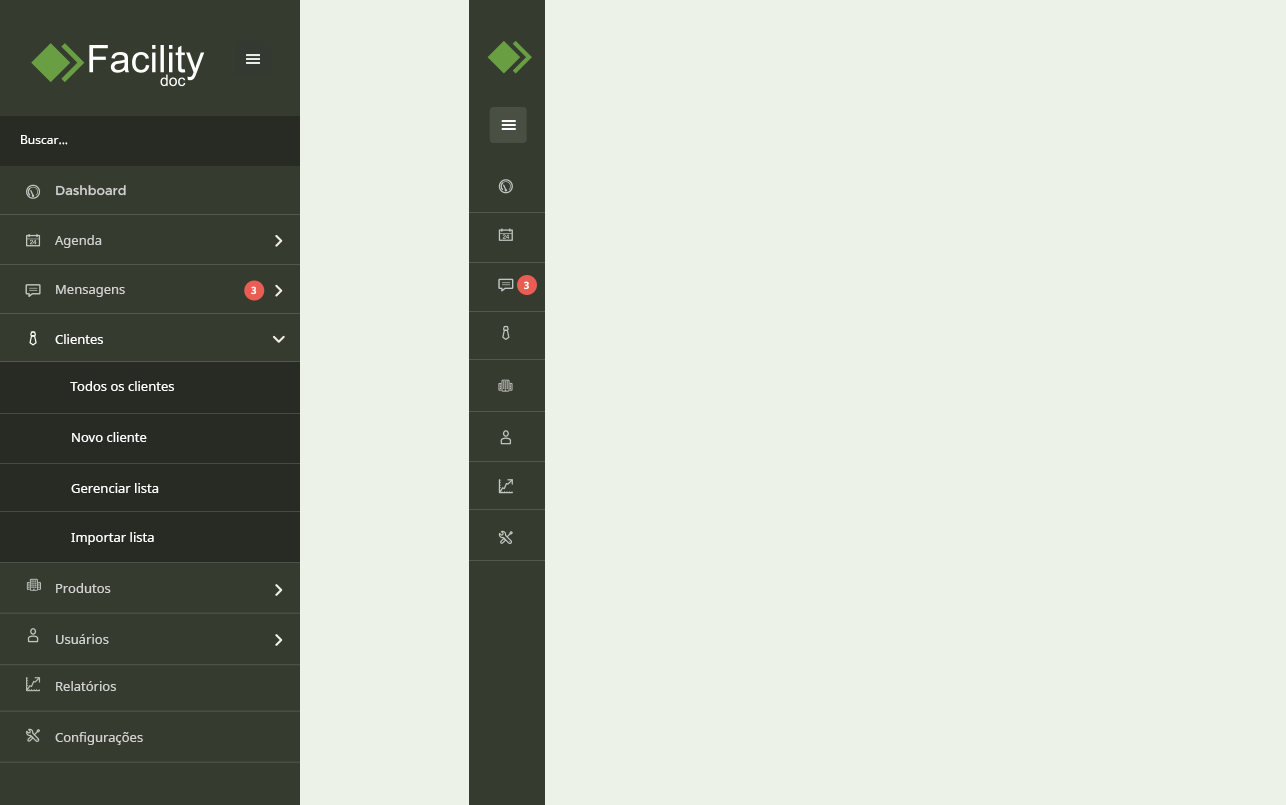
<style>
.page{position:relative;width:1286px;height:805px;background:#edf2e8}
.page>*{position:absolute;margin:0}
.t1{font:12px "NotoSans";color:#ffffff}
.t2{font:13px "Montserrat-Regular";color:#d1d2d0}
.t3{font:13px "NotoSans";color:#d1d2d0}
.t4{font:10px "NotoSans-Bold";color:#ffffff}
.t5{font:13px "NotoSans";color:#ffffff}
</style>
<div class="page">
<p class="t1" style="left:21px;top:135px;width:47px;height:10px">Buscar...</p>
<p class="t2" style="left:56px;top:185px;width:70px;height:11px">Dashboard</p>
<p class="t3" style="left:55px;top:235px;width:47px;height:13px">Agenda</p>
<p class="t4" style="left:524px;top:281px;width:5px;height:9px">3</p>
<p class="t3" style="left:56px;top:285px;width:69px;height:12px">Mensagens</p>
<p class="t4" style="left:251px;top:286px;width:6px;height:9px">3</p>
<p class="t5" style="left:55px;top:334px;width:48px;height:10px">Clientes</p>
<p class="t5" style="left:70px;top:381px;width:104px;height:10px">Todos os clientes</p>
<p class="t5" style="left:72px;top:432px;width:75px;height:10px">Novo cliente</p>
<p class="t5" style="left:71px;top:483px;width:88px;height:10px">Gerenciar lista</p>
<p class="t5" style="left:71px;top:532px;width:83px;height:13px">Importar lista</p>
<p class="t3" style="left:56px;top:583px;width:55px;height:10px">Produtos</p>
<p class="t3" style="left:56px;top:634px;width:53px;height:10px">Usuários</p>
<p class="t3" style="left:56px;top:681px;width:60px;height:10px">Relatórios</p>
<p class="t3" style="left:55px;top:732px;width:88px;height:13px">Configurações</p>
</div>
